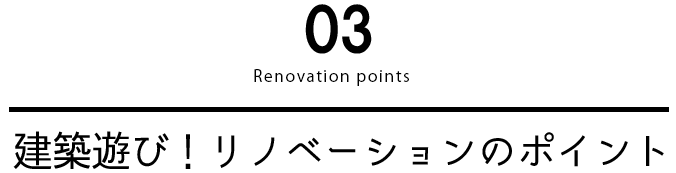
<style>
.page{position:relative;width:676px;height:173px;background:#ffffff}
.page>*{position:absolute;margin:0}
.t1{font:60px "HGPSoeiKakugothicUB";letter-spacing:-0.05em;color:#000000}
.t2{font:16px "04KanjyukuGothic";letter-spacing:0.1em;color:#000000}
.t3{font:42px "komorebi-gothic";letter-spacing:-0.08em;color:#000000}
</style>
<div class="page">
<p class="t1" style="left:305px;top:4px;width:67px;height:50px">03</p>
<p class="t2" style="left:254px;top:69px;width:155px;height:17px">Renovation points</p>
<p class="t3" style="left:13px;top:131px;width:651px;height:38px">建築遊び！リノベーションのポイント</p>
</div>
